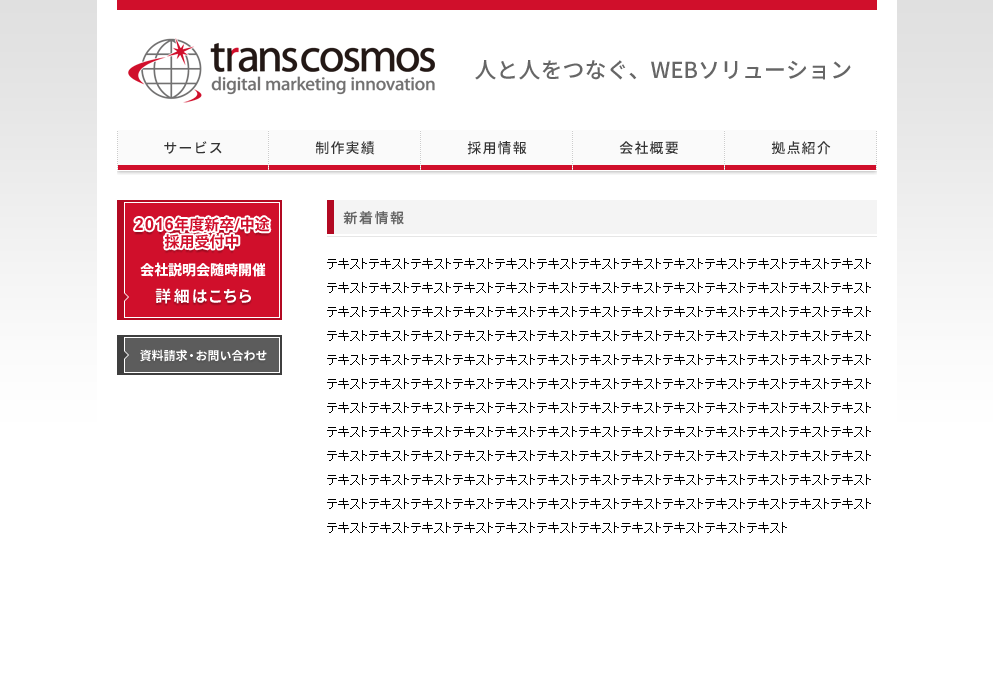
<style>
.page{position:relative;width:993px;height:687px;background:#ffffff}
.page>*{position:absolute;margin:0}
.t1{font:22px "NotoSansCJKjp-Medium";color:#666666}
.t2{font:14px "NotoSansCJKjp-Medium";letter-spacing:0.08em;color:#333333}
.t3{font:15px/18px "KozGoPro-Bold";color:#d00f2b}
.t4{font:16.5px/18px "Arial-BoldMT";letter-spacing:0.06em;color:#d00f2b}
.t5{font:14px "NotoSansCJKjp-Medium";letter-spacing:0.11em;color:#666666}
.t6{font:14px "NotoSansCJKjp-Bold";color:#ffffff}
.t7{font:12px/24px "MS-PGothic";color:#000000}
.t8{font:16px "NotoSansCJKjp-Bold";color:#ffffff}
.t9{font:16px "NotoSansCJKjp-Bold";letter-spacing:0.08em;color:#ffffff}
.t10{font:12px "NotoSansCJKjp-Bold";color:#ffffff}
.t11{font:12px "NotoSansCJKjp-Bold";letter-spacing:-0.1em;color:#ffffff}
</style>
<div class="page">
<p class="t1" style="left:475px;top:60px;width:376px;height:20px">人と人をつなぐ、WEBソリューション</p>
<p class="t2" style="left:164px;top:141px;width:58px;height:13px">サービス</p>
<p class="t2" style="left:315px;top:141px;width:60px;height:14px">制作実績</p>
<p class="t2" style="left:467px;top:141px;width:60px;height:14px">採用情報</p>
<p class="t2" style="left:619px;top:141px;width:59px;height:14px">会社概要</p>
<p class="t2" style="left:771px;top:141px;width:60px;height:14px">拠点紹介</p>
<p class="t3" style="left:135px;top:217px;width:135px;height:32px;text-align:center"><span class="t4">2016</span>年度新卒/中途<br>採用受付中</p>
<p class="t5" style="left:343px;top:211px;width:61px;height:14px">新着情報</p>
<p class="t6" style="left:140px;top:262px;width:126px;height:15px">会社説明会随時開催</p>
<p class="t7" style="left:327px;top:258px;width:544px;height:275px">テキストテキストテキストテキストテキストテキストテキストテキストテキストテキストテキストテキストテキストテキストテキストテキストテキストテキストテキストテキストテキストテキストテキストテキストテキストテキストテキストテキストテキストテキストテキストテキストテキストテキストテキストテキストテキストテキストテキストテキストテキストテキストテキストテキストテキストテキストテキストテキストテキストテキストテキストテキストテキストテキストテキストテキストテキストテキストテキストテキストテキストテキストテキストテキストテキストテキストテキストテキストテキストテキストテキストテキストテキストテキストテキストテキストテキストテキストテキストテキストテキストテキストテキストテキストテキストテキストテキストテキストテキストテキストテキストテキストテキストテキストテキストテキストテキストテキストテキストテキストテキストテキストテキストテキストテキストテキストテキストテキストテキストテキストテキストテキストテキストテキストテキストテキストテキストテキストテキストテキストテキストテキストテキストテキストテキストテキストテキストテキストテキストテキストテキストテキストテキストテキストテキストテキストテキストテキストテキストテキストテキストテキストテキストテキストテキストテキストテキストテキストテキストテキストテキストテキストテキストテキスト</p>
<p class="t8" style="left:155px;top:288px;width:96px;height:16px"><span class="t9">詳細</span>はこちら</p>
<p class="t10" style="left:140px;top:349px;width:127px;height:13px">資料請求<span class="t11">・</span>お問い合わせ</p>
</div>
